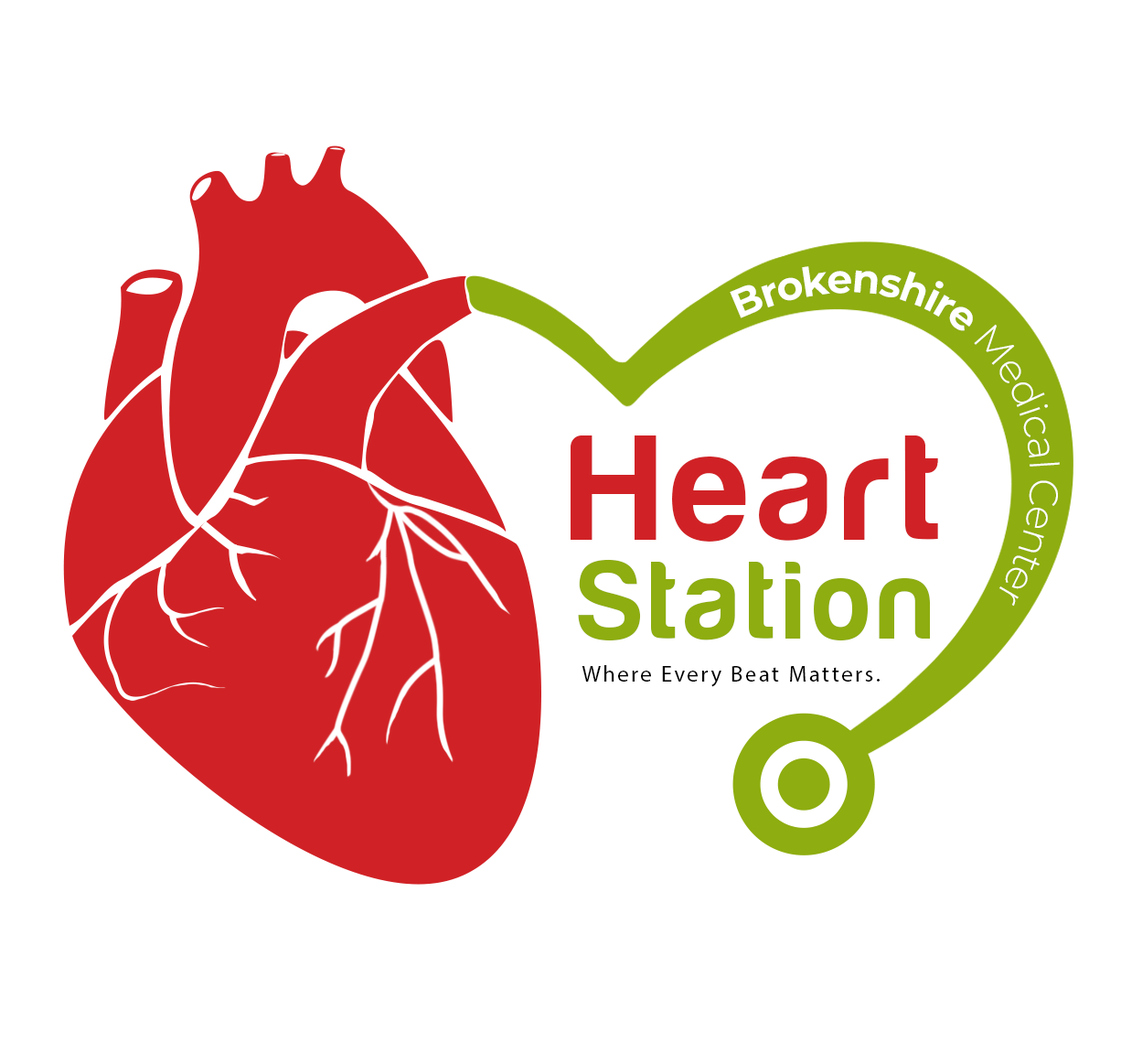
<style>
.page{position:relative;width:1121px;height:1064px;background:#ffffff}
.page>*{position:absolute;margin:0}
.t1{font:153.1px "HarabaraMaisBold-HarabaraMaisBold";letter-spacing:0.04em;color:#d02226}
.t2{font:112.5px "HarabaraMaisBold-HarabaraMaisBold";letter-spacing:0.04em;color:#8ead10}
.t3{font:22.5px "MyriadPro-Regular";letter-spacing:0.1em;color:#000000}
</style>
<div class="page">
<p class="t1" style="left:571px;top:435px;width:367px;height:106px">Heart</p>
<p class="t2" style="left:578px;top:559px;width:352px;height:82px">Station</p>
<p class="t3" style="left:582px;top:665px;width:298px;height:22px">Where Every Beat Matters.</p>
</div>
